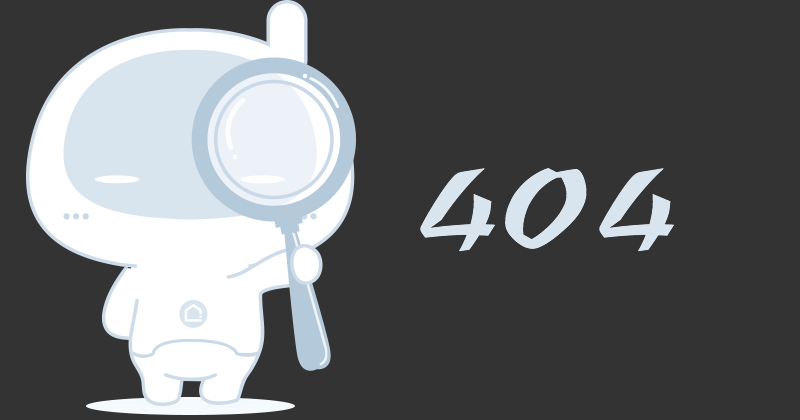
<style>
.page{position:relative;width:800px;height:420px;background:#333333}
.page>*{position:absolute;margin:0}
.t1{font:160px "STBaoliSC-Regular";color:#d8e5ef}
</style>
<div class="page">
<p class="t1" style="left:420px;top:168px;width:254px;height:84px">404</p>
</div>
